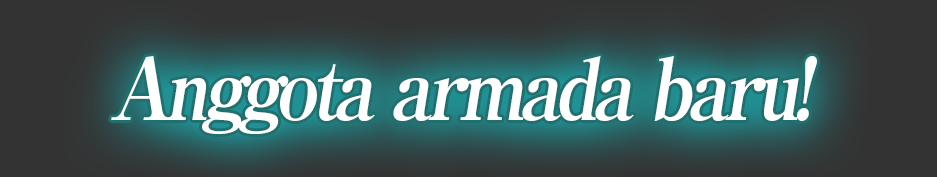
<style>
.page{position:relative;width:937px;height:177px;background:#333333}
.page>*{position:absolute;margin:0}
.t1{font:86px "RyuminPro-ExBold";letter-spacing:-0.08em;color:#ffffff;font-style:italic;scale:0.9 1}
</style>
<div class="page">
<p class="t1" style="left:111px;top:56px;width:706px;height:78px">Anggota armada baru!</p>
</div>
